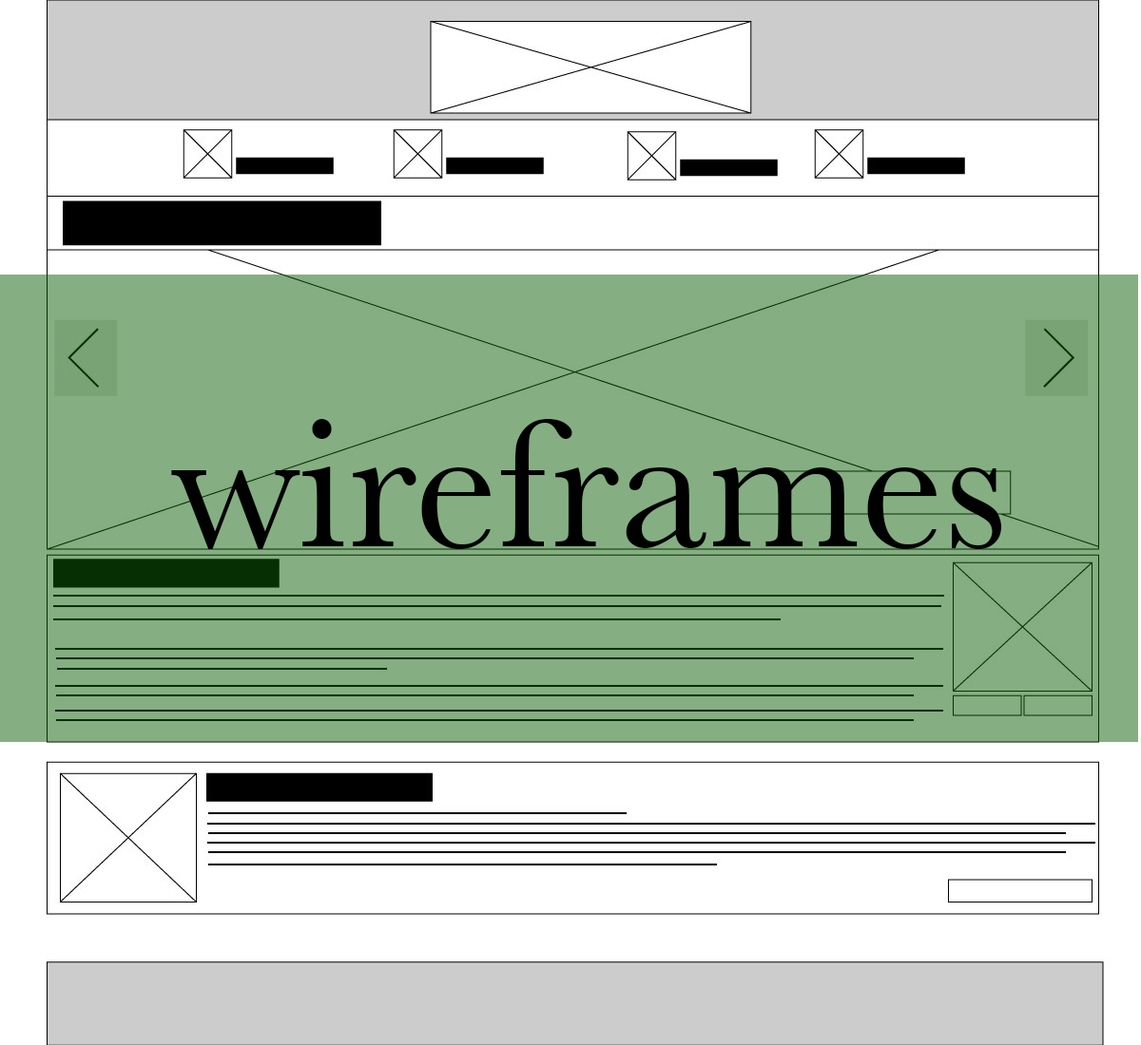
<style>
.page{position:relative;width:1141px;height:1045px;background:#ffffff}
.page>*{position:absolute;margin:0}
.t1{font:190.1px "Baskerville";color:#000000}
</style>
<div class="page">
<p class="t1" style="left:171px;top:419px;width:831px;height:130px">wireframes</p>
</div>
